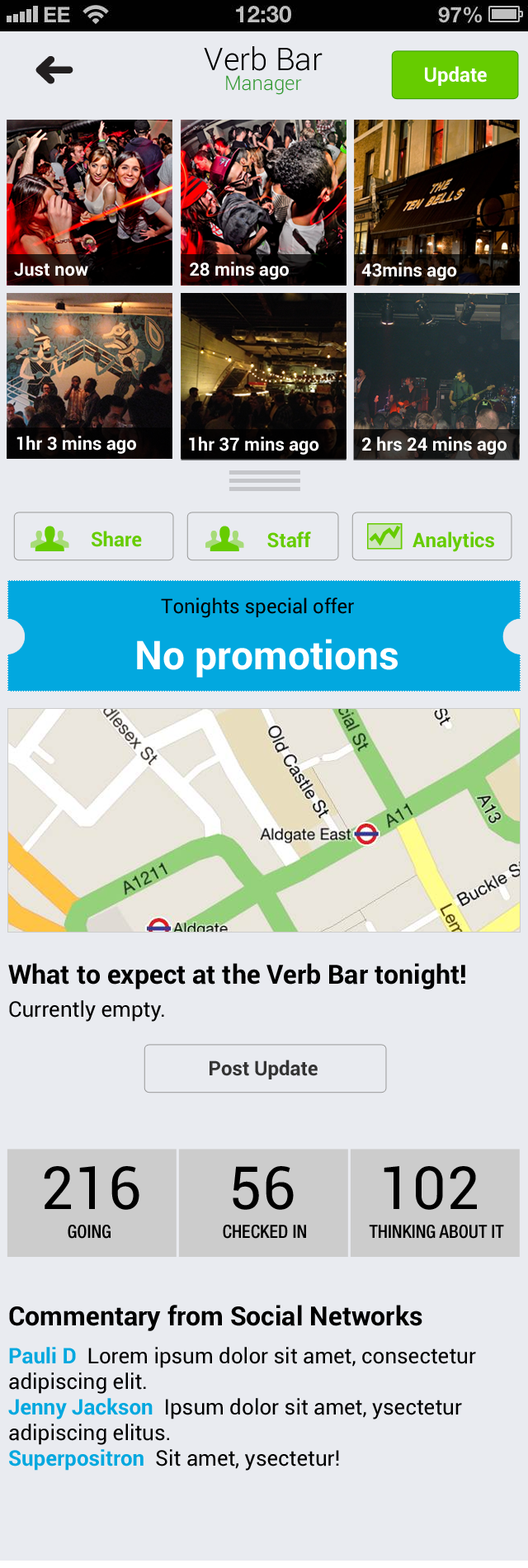
<style>
.page{position:relative;width:528px;height:1568px;background:#e9ebf0}
.page>*{position:absolute;margin:0}
.t1{font:31.4px "Roboto-Light";color:#000000}
.t2{font:19.8px "Roboto-Light";color:#339933}
.t3{font:19.8px "Roboto-Bold";color:#ffffff}
.t4{font:18.2px "Roboto-Bold";color:#ffffff}
.t5{font:19.8px "Roboto-Bold";color:#66cc00}
.t6{font:19.8px "Roboto-Regular";color:#000000}
.t7{font:39.6px "Roboto-Bold";color:#ffffff}
.t8{font:26.4px/33px "Roboto-Bold";color:#000000}
.t9{font:21.5px/33px "Roboto-Regular";color:#000000}
.t10{font:19.8px "Roboto-Bold";color:#333333}
.t11{font:59.4px "Roboto-Regular";color:#000000}
.t12{font:18.2px "HelveticaNeueLTPro-MdCn";color:#000000}
.t13{font:26.4px "Roboto-Bold";color:#000000}
.t14{font:21.5px "Roboto-Regular";color:#000000}
.t15{font:21.5px "Roboto-Bold";color:#02a8df}
</style>
<div class="page">
<p class="t1" style="left:204px;top:46px;width:119px;height:25px">Verb Bar</p>
<p class="t2" style="left:226px;top:75px;width:76px;height:20px">Manager</p>
<p class="t3" style="left:425px;top:66px;width:62px;height:20px">Update</p>
<p class="t4" style="left:14px;top:262px;width:74px;height:14px">Just now</p>
<p class="t4" style="left:190px;top:262px;width:99px;height:18px">28 mins ago</p>
<p class="t4" style="left:361px;top:262px;width:96px;height:19px">43mins ago</p>
<p class="t4" style="left:17px;top:436px;width:119px;height:18px">1hr 3 mins ago</p>
<p class="t4" style="left:189px;top:437px;width:130px;height:18px">1hr 37 mins ago</p>
<p class="t4" style="left:362px;top:437px;width:145px;height:18px">2 hrs 24 mins ago</p>
<p class="t5" style="left:92px;top:531px;width:50px;height:16px">Share</p>
<p class="t5" style="left:267px;top:531px;width:44px;height:17px">Staff</p>
<p class="t5" style="left:413px;top:531px;width:81px;height:21px">Analytics</p>
<p class="t6" style="left:161px;top:597px;width:193px;height:21px">Tonights special offer</p>
<p class="t7" style="left:137px;top:639px;width:261px;height:39px">No promotions</p>
<p class="t8" style="left:8px;top:963px;width:457px;height:59px">What to expect at the Verb Bar tonight!<br><span class="t9">Currently empty.</span></p>
<p class="t10" style="left:210px;top:1060px;width:108px;height:19px">Post Update</p>
<p class="t11" style="left:44px;top:1166px;width:95px;height:44px">216</p>
<p class="t11" style="left:233px;top:1166px;width:61px;height:44px">56</p>
<p class="t11" style="left:384px;top:1166px;width:93px;height:44px">102</p>
<p class="t12" style="left:68px;top:1225px;width:43px;height:14px">GOING</p>
<p class="t12" style="left:223px;top:1225px;width:83px;height:14px">CHECKED IN</p>
<p class="t12" style="left:369px;top:1225px;width:135px;height:14px">THINKING ABOUT IT</p>
<p class="t13" style="left:9px;top:1305px;width:414px;height:26px">Commentary from Social Networks</p>
<p class="t14" style="left:8px;top:1347px;width:468px;height:124px"><span class="t15">Pauli D</span>  Lorem ipsum dolor sit amet, consectetur adipiscing elit. <br><span class="t15">Jenny Jackson</span>  Ipsum dolor sit amet, ysectetur adipiscing elitus.<br><span class="t15">Superpositron</span>  Sit amet, ysectetur!</p>
</div>
